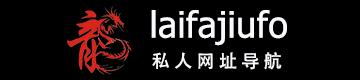
<style>
.page{position:relative;width:360px;height:80px;background:#000000}
.page>*{position:absolute;margin:0}
.t1{font:36px "Tahoma";letter-spacing:0.01em;color:#f9f9fd}
.t2{font:18px "AdobeHeitiStd-Regular";letter-spacing:0.01em;color:#f9f9fd}
</style>
<div class="page">
<p class="t1" style="left:151px;top:10px;width:136px;height:36px">laifajiufo</p>
<p class="t2" style="left:152px;top:52px;width:130px;height:18px">私 人 网 址 导 航</p>
</div>
